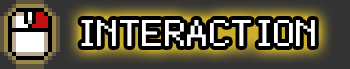
<style>
.page{position:relative;width:350px;height:69px;background:#000000}
.page>*{position:absolute;margin:0}
.t1{font:52px "Silver";color:#ffffff;scale:1.3 1}
</style>
<div class="page">
<p class="t1" style="left:81px;top:20px;width:234px;height:26px">INTERACTION</p>
</div>
